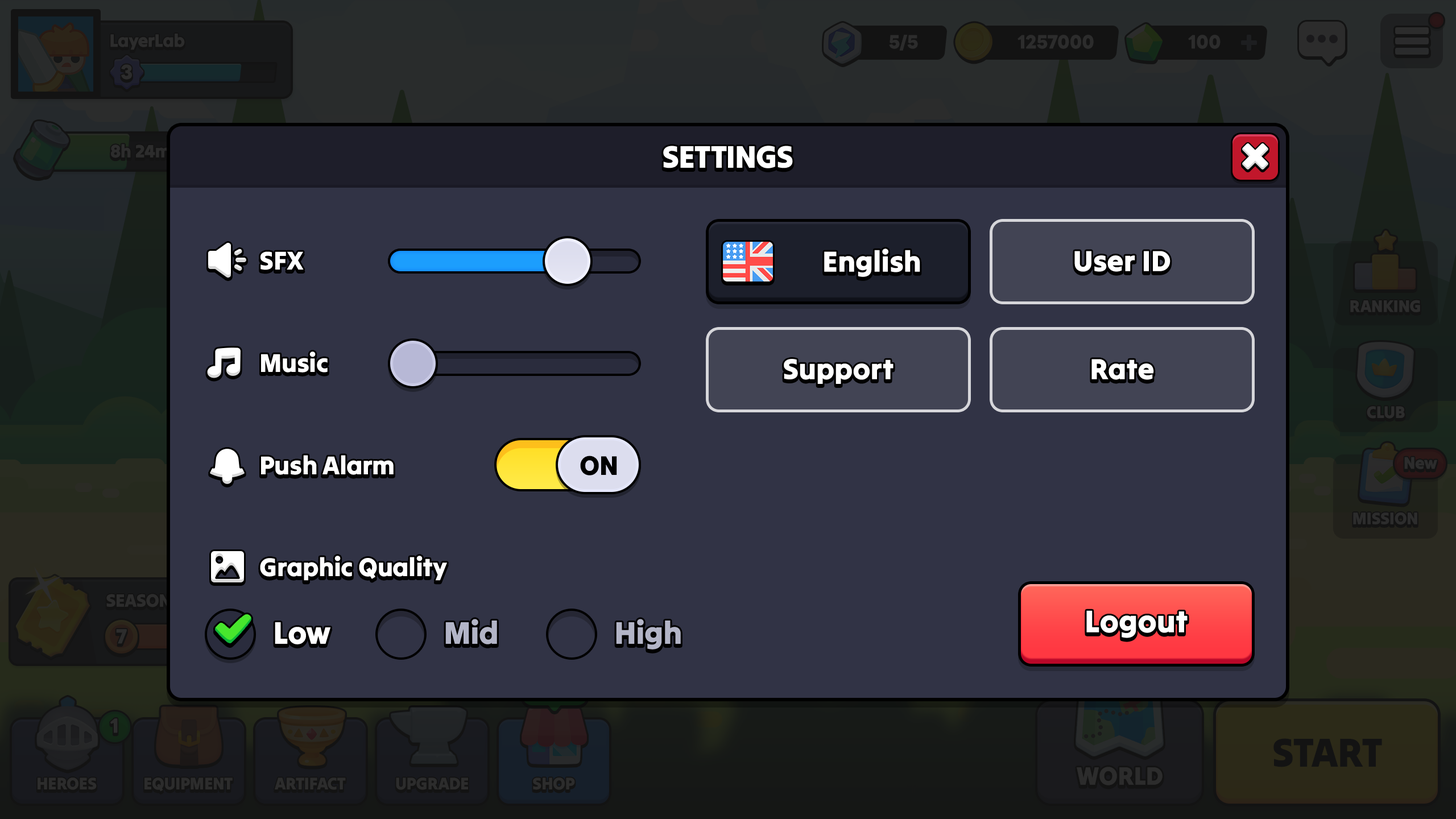
<style>
.page{position:relative;width:1456px;height:819px;background:#313345}
.page>*{position:absolute;margin:0}
.t1{font:31.8px "TiltWarp-Regular";letter-spacing:-0.01em;color:#ffffff;text-transform:uppercase}
.t2{font:26.2px "TiltWarp-Regular";letter-spacing:-0.01em;color:#ffffff}
.t3{font:29.6px "TiltWarp-Regular";color:#ffffff}
.t4{font:27.3px "TiltWarp-Regular";letter-spacing:-0.01em;color:#000000;text-transform:uppercase}
.t5{font:31.8px "TiltWarp-Regular";color:#ffffff}
.t6{font:31.8px "TiltWarp-Regular";letter-spacing:-0.01em;color:#ffffff}
.t7{font:31.8px "TiltWarp-Regular";letter-spacing:-0.01em;color:#b3b5c7}
</style>
<div class="page">
<p class="t1" style="left:663px;top:146px;width:130px;height:22px">Settings</p>
<p class="t2" style="left:260px;top:251px;width:44px;height:19px">SFX</p>
<p class="t3" style="left:824px;top:249px;width:96px;height:28px">English</p>
<p class="t3" style="left:1074px;top:251px;width:96px;height:21px">User ID</p>
<p class="t2" style="left:261px;top:351px;width:67px;height:22px">Music</p>
<p class="t3" style="left:784px;top:359px;width:109px;height:25px">Support</p>
<p class="t3" style="left:1091px;top:359px;width:63px;height:21px">Rate</p>
<p class="t2" style="left:261px;top:455px;width:133px;height:20px">Push Alarm</p>
<p class="t4" style="left:580px;top:456px;width:37px;height:19px">On</p>
<p class="t2" style="left:260px;top:556px;width:187px;height:25px">Graphic Quality</p>
<p class="t5" style="left:1086px;top:610px;width:102px;height:28px">Logout</p>
<p class="t6" style="left:275px;top:622px;width:56px;height:22px">Low</p>
<p class="t7" style="left:445px;top:619px;width:52px;height:25px">Mid</p>
<p class="t7" style="left:616px;top:619px;width:65px;height:31px">High</p>
</div>
